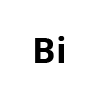
<style>
.page{position:relative;width:100px;height:100px;background:#ffffff}
.page>*{position:absolute;margin:0}
.t1{font:35px "OpenSans-Bold";color:#000000}
</style>
<div class="page">
<p class="t1" style="left:35px;top:36px;width:30px;height:27px">Bi</p>
</div>
